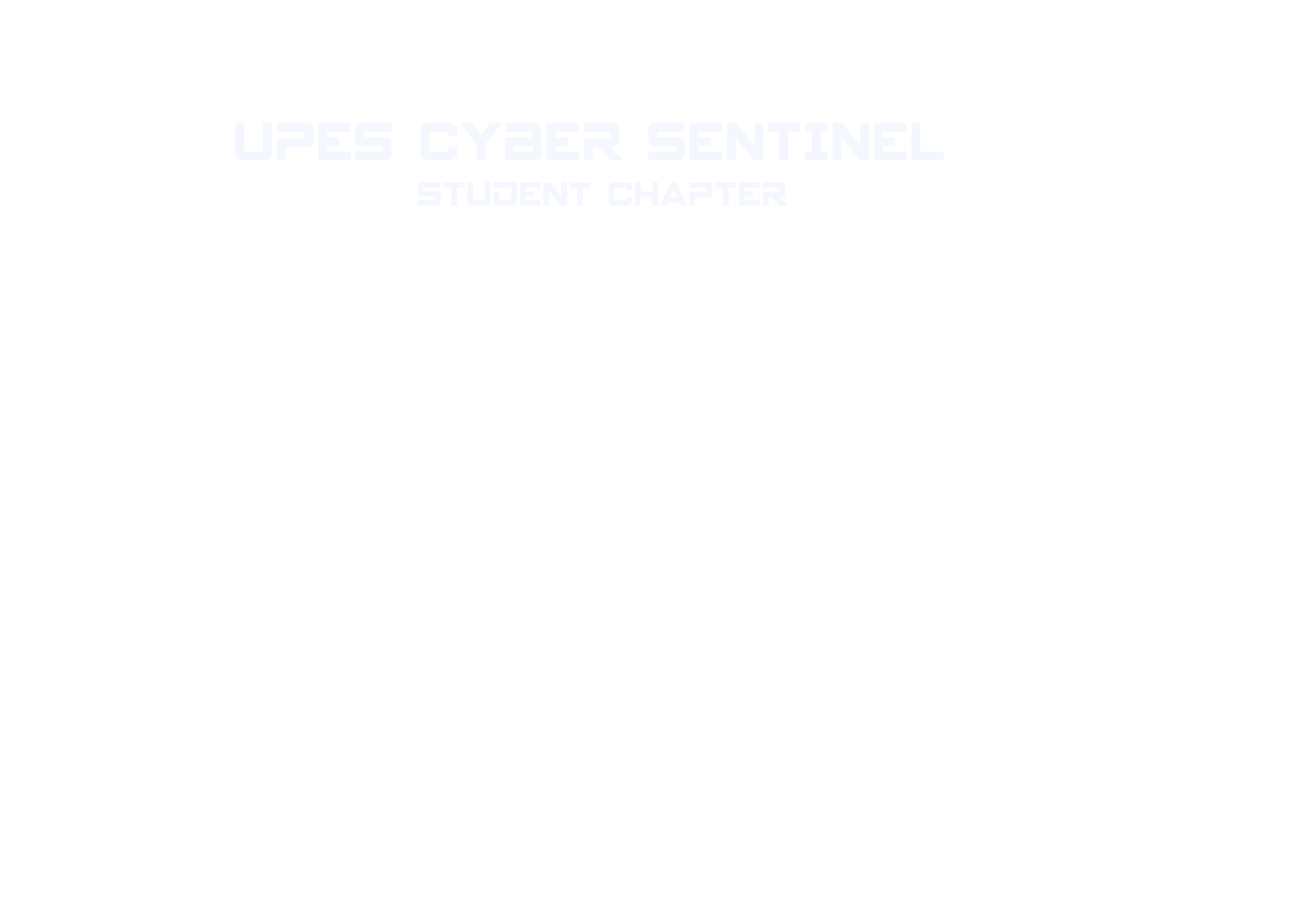
<style>
.page{position:relative;width:1292px;height:923px;background:#ffffff}
.page>*{position:absolute;margin:0}
.t1{font:58.8px "SpyAgency";color:#f5f7ff;scale:0.85 1}
.t2{font:37.3px "SpyAgency";color:#f5f7ff;scale:0.85 1}
</style>
<div class="page">
<p class="t1" style="left:235px;top:123px;width:709px;height:82px;text-align:center">upes CYBER SENTINEL <br><span class="t2">student chapter</span></p>
</div>
